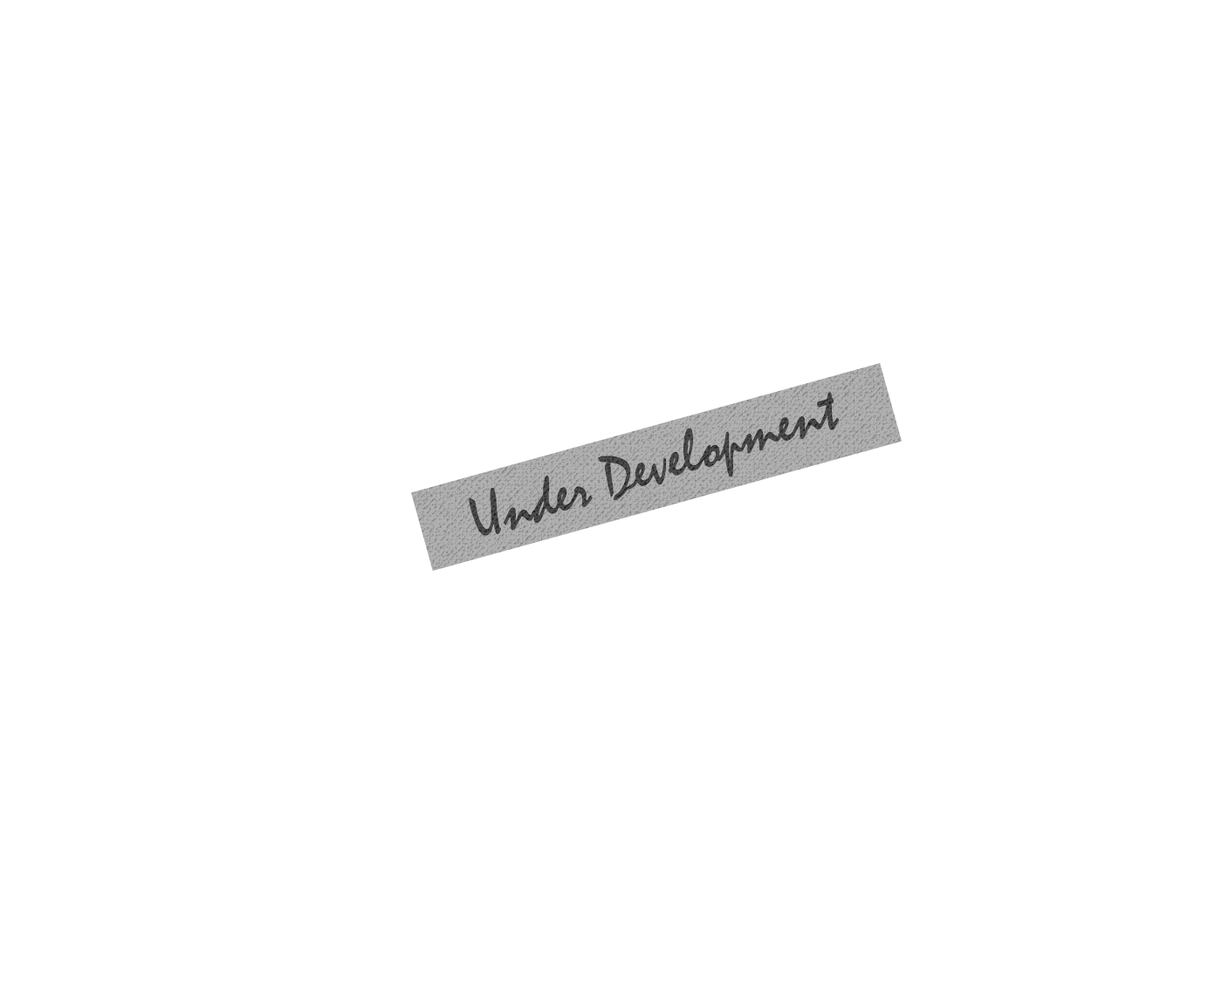
<style>
.page{position:relative;width:1215px;height:981px;background:#ffffff}
.page>*{position:absolute;margin:0}
.t1{font:62.9px "Mistral";color:#454545}
</style>
<div class="page">
<p class="t1" style="left:469px;top:392px;width:371px;height:144px;rotate:-18deg">Under Development</p>
</div>
